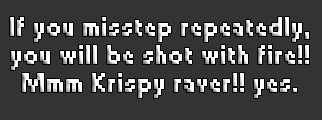
<style>
.page{position:relative;width:322px;height:120px;background:#333333}
.page>*{position:absolute;margin:0}
.t1{font:24px/28px "Small Fonts";color:#ffffff;font-weight:bold}
</style>
<div class="page">
<p class="t1" style="left:10px;top:17px;width:299px;height:81px;text-align:center">If you misstep repeatedly,<br>you will be shot with fire!!<br>Mmm Krispy raver!! yes.</p>
</div>
